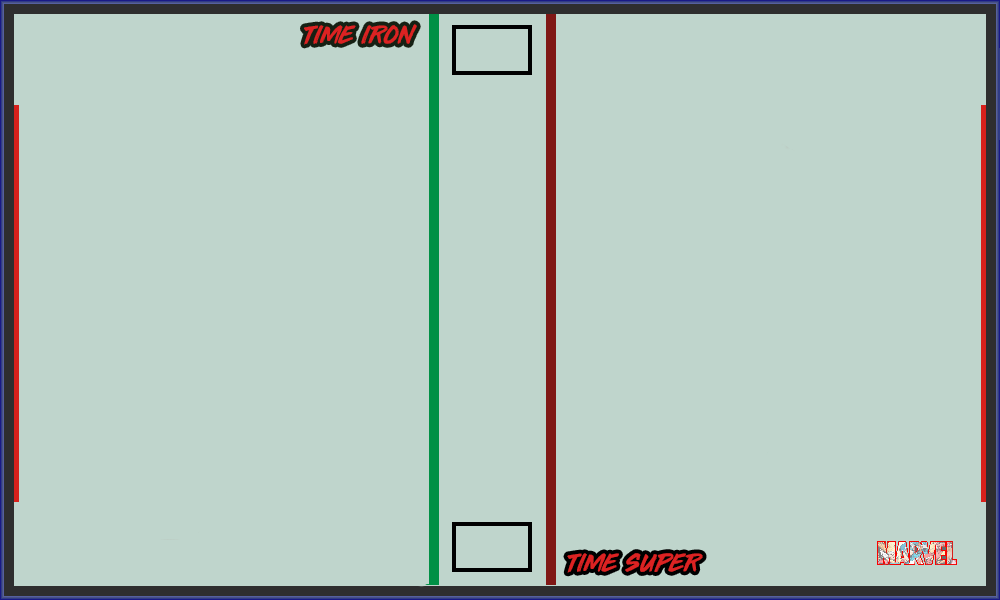
<style>
.page{position:relative;width:1000px;height:600px;background:#bfd5cc}
.page>*{position:absolute;margin:0}
.t1{font:30px "ThirdRail";color:#dc2222}
</style>
<div class="page">
<p class="t1" style="left:304px;top:24px;width:113px;height:21px">time iron</p>
<p class="t1" style="left:567px;top:553px;width:136px;height:20px">time super</p>
</div>
